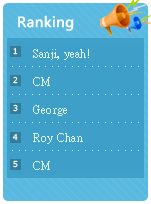
<style>
.page{position:relative;width:151px;height:204px;background:#3ea0c8}
.page>*{position:absolute;margin:0}
.t1{font:14px "MicrosoftJhengHeiBold";letter-spacing:0.02em;color:#ffffff}
.t2{font:8px "Verdana";letter-spacing:0.02em;color:#ffffff}
.t3{font:12px/28px "PMingLiU";letter-spacing:0.02em;color:#e0f6ff}
.t4{font:12px "PMingLiU";letter-spacing:0.02em;color:#c4eeff}
</style>
<div class="page">
<p class="t1" style="left:18px;top:15px;width:56px;height:16px">Ranking</p>
<p class="t2" style="left:13px;top:47px;width:5px;height:8px">1</p>
<p class="t3" style="left:33px;top:49px;width:56px;height:121px;text-align:justify">Sanji, yeah!<br>CM<br>George<br>Roy Chan<br>CM</p>
<p class="t4" style="left:12px;top:66px;width:127px;height:1px">. . . . . . . . . . . . . . . . . . . . . . . . . .</p>
<p class="t2" style="left:13px;top:76px;width:5px;height:8px">2</p>
<p class="t4" style="left:12px;top:94px;width:127px;height:1px">. . . . . . . . . . . . . . . . . . . . . . . . . .</p>
<p class="t2" style="left:13px;top:104px;width:5px;height:8px">3</p>
<p class="t4" style="left:12px;top:122px;width:127px;height:1px">. . . . . . . . . . . . . . . . . . . . . . . . . .</p>
<p class="t2" style="left:12px;top:133px;width:6px;height:8px">4</p>
<p class="t4" style="left:12px;top:150px;width:127px;height:1px">. . . . . . . . . . . . . . . . . . . . . . . . . .</p>
<p class="t2" style="left:13px;top:160px;width:5px;height:8px">5</p>
</div>
